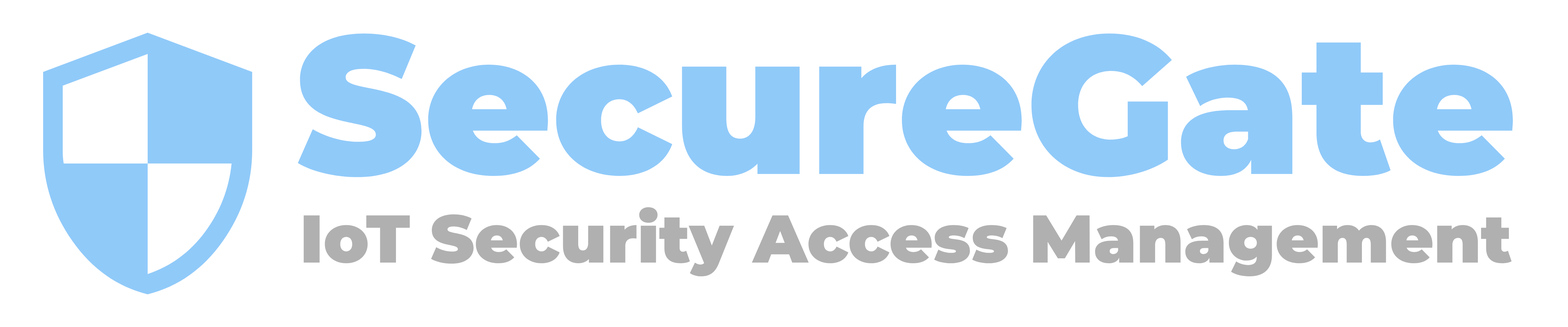
<style>
.page{position:relative;width:1568px;height:327px;background:#ffffff}
.page>*{position:absolute;margin:0}
.t1{font:196px "Montserrat-Black";color:#90caf9}
.t2{font:67.3px "Montserrat-Black";color:#b0b0b0}
</style>
<div class="page">
<p class="t1" style="left:298px;top:33px;width:1215px;height:144px">SecureGate</p>
<p class="t2" style="left:303px;top:207px;width:1209px;height:69px">IoT Security Access Management</p>
</div>
